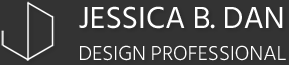
<style>
.page{position:relative;width:289px;height:65px;background:#333333}
.page>*{position:absolute;margin:0}
.t1{font:20.8px/31.1px "HindSiliguri-Light";color:#ffffff}
.t2{font:31.2px "HindSiliguri-Regular";color:#ffffff}
</style>
<div class="page">
<p class="t1" style="left:79px;top:6px;width:207px;height:55px"><span class="t2">JESSICA B. DAN<br></span>DESIGN PROFESSIONAL</p>
</div>
